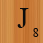
<style>
.page{position:relative;width:43px;height:43px}
.page>*{position:absolute;margin:0}
.t1{font:30px "TimesNewRomanPSMT";color:#0c0c0b}
.t2{font:12px "TimesNewRomanPSMT";color:#0c0c0b}
</style>
<div class="page">
<p class="t1" style="left:17px;top:8px;width:12px;height:20px">J</p>
<p class="t2" style="left:33px;top:28px;width:6px;height:9px">8</p>
</div>
